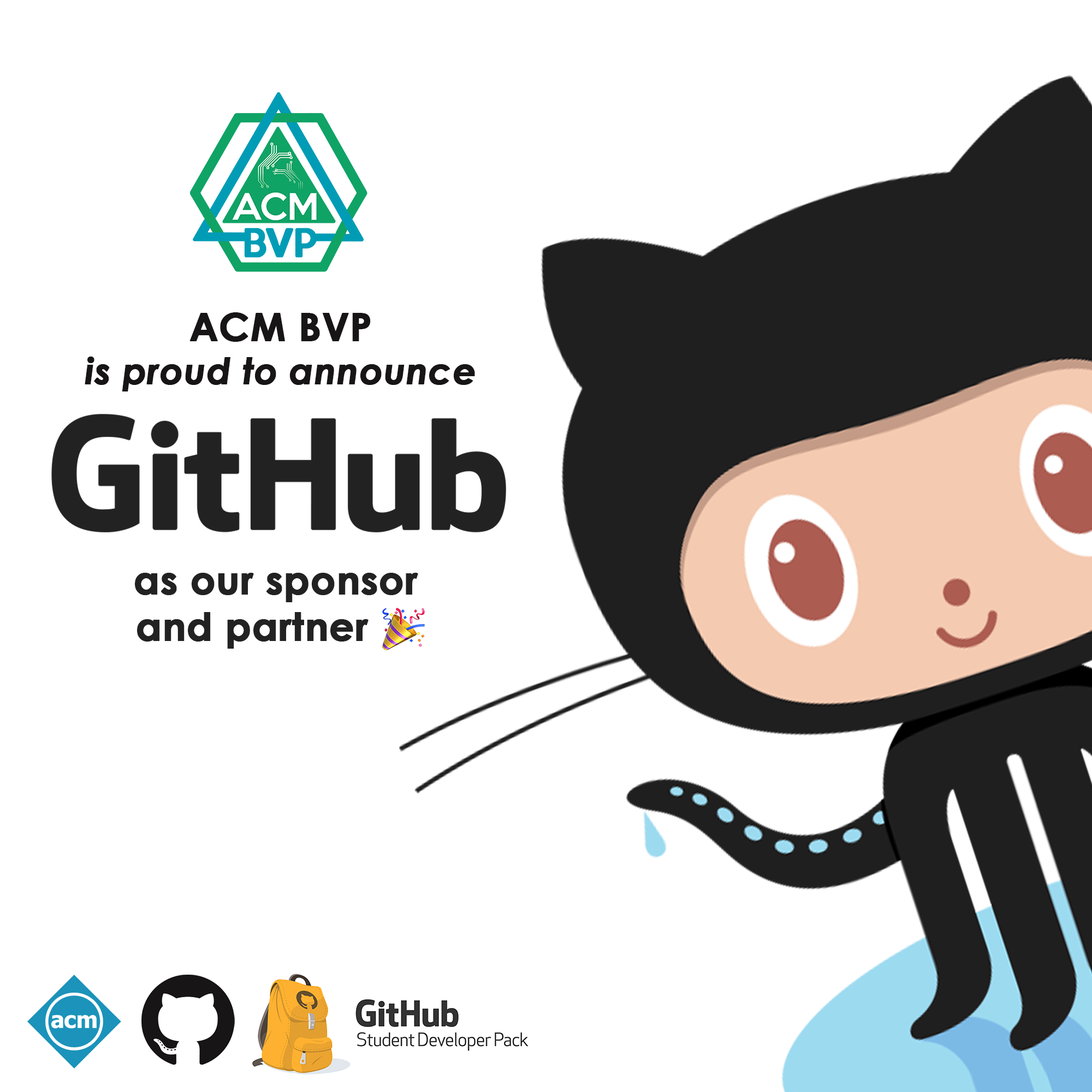
<style>
.page{position:relative;width:1092px;height:1092px;background:#ffffff}
.page>*{position:absolute;margin:0}
.t1{font:36.1px "CenturyGothic-BoldItalic";color:#171515;font-weight:bold}
.t2{font:38.8px "CenturyGothic-Bold";color:#171515;font-weight:bold}
.t3{font:38.8px "CenturyGothic-Bold";color:#222222;font-weight:bold}
</style>
<div class="page">
<p class="t1" style="left:85px;top:312px;width:390px;height:79px;text-align:center"><span class="t2">ACM BVP<br></span>is proud to announce</p>
<p class="t3" style="left:135px;top:573px;width:283px;height:76px;text-align:center">as our sponsor<br>and partner</p>
</div>
